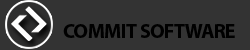
<style>
.page{position:relative;width:250px;height:50px;background:#333333}
.page>*{position:absolute;margin:0}
.t1{font:20.8px "MyriadPro-Bold";letter-spacing:-0.035em;color:#000000;text-transform:uppercase}
</style>
<div class="page">
<p class="t1" style="left:63px;top:24px;width:172px;height:14px">Commit Software</p>
</div>
